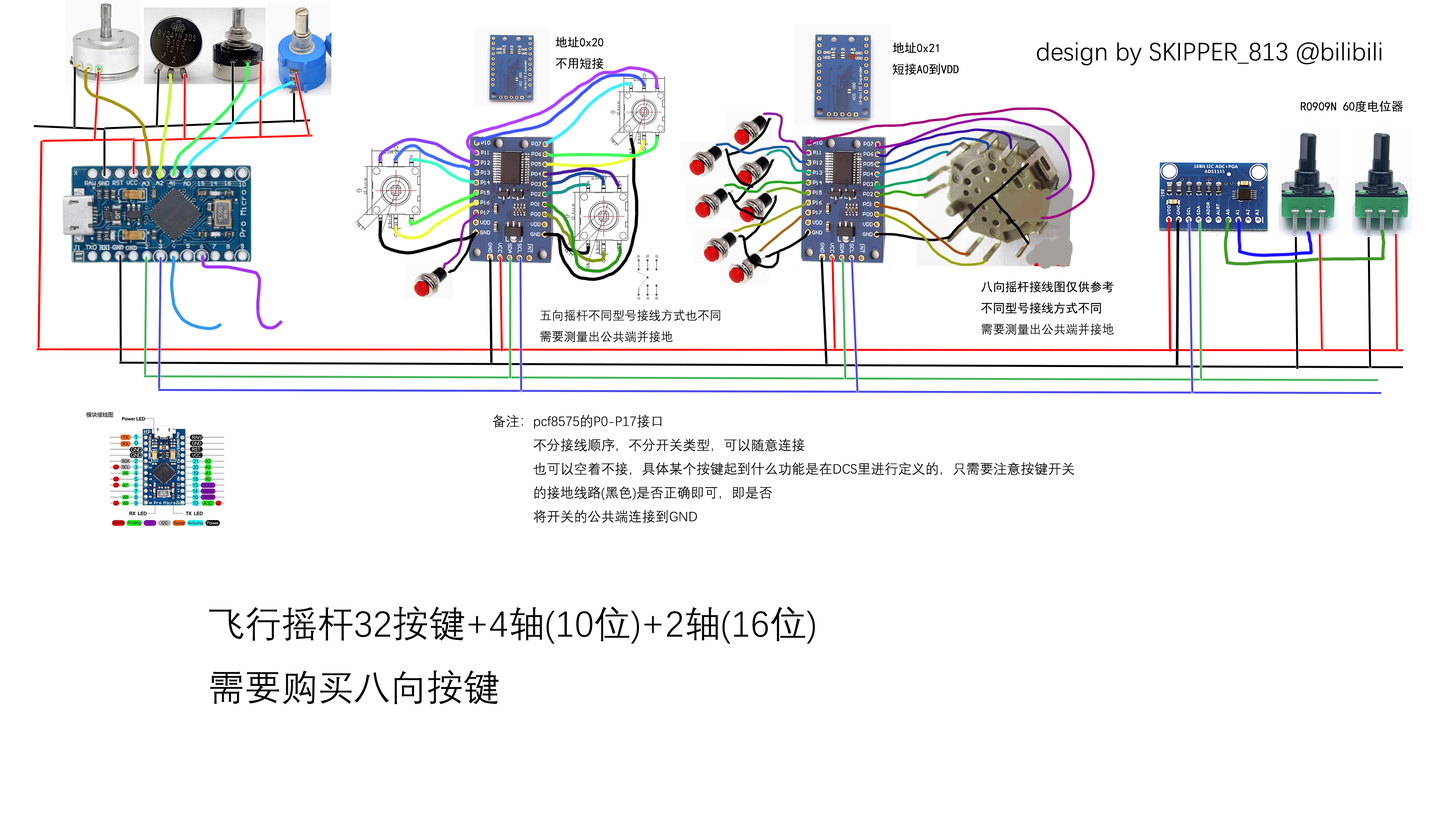
<style>
.page{position:relative;width:1456px;height:819px;background:#ffffff}
.page>*{position:absolute;margin:0}
.t1{font:4.5px "SimHei";color:#000000}
.t2{font:12.1px "SimHei";color:#000000}
.t3{font:25.5px "DengXian";color:#000000}
.t4{font:12.1px "DengXian";color:#000000}
.t5{font:13.6px "DengXian";color:#000000}
.t6{font:36.4px "DengXian";color:#000000}
</style>
<div class="page">
<p class="t1" style="left:555px;top:36px;width:49px;height:33px">地址0x20<br>不用短接</p>
<p class="t2" style="left:893px;top:42px;width:66px;height:33px">地址0x21<br>短接A0到VDD</p>
<p class="t3" style="left:1037px;top:42px;width:344px;height:24px">design by SKIPPER_813 @bilibili</p>
<p class="t2" style="left:1301px;top:100px;width:102px;height:12px">R0909N 60度电位器</p>
<p class="t2" style="left:981px;top:281px;width:133px;height:54px">八向摇杆接线图仅供参考<br>不同型号接线方式不同<br><span class="t4">需要测量出公共端并接地</span></p>
<p class="t4" style="left:540px;top:309px;width:180px;height:33px">五向摇杆不同型号接线方式也不同<br>需要测量出公共端并接地</p>
<p class="t5" style="left:493px;top:414px;width:582px;height:109px">备注：pcf8575的P0-P17接口<br>        不分接线顺序，不分开关类型，可以随意连接<br>        也可以空着不接，具体某个按键起到什么功能是在DCS里进行定义的，只需要注意按键开关<br>        的接地线路(黑色)是否正确即可，即是否<br>        将开关的公共端连接到GND</p>
<p class="t6" style="left:209px;top:606px;width:606px;height:98px">飞行摇杆32按键+4轴(10位)+2轴(16位)<br>需要购买八向按键</p>
</div>
